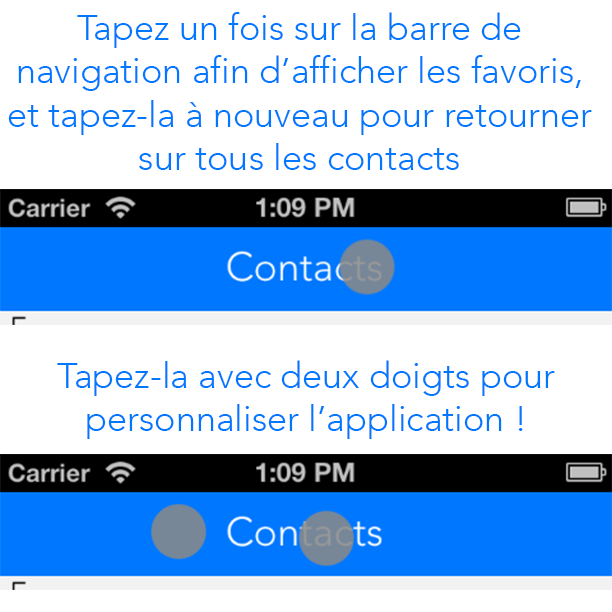
<style>
.page{position:relative;width:612px;height:612px;background:#ffffff}
.page>*{position:absolute;margin:0}
.t1{font:36px "Avenir-Light";color:#0077ff}
</style>
<div class="page">
<p class="t1" style="left:8px;top:12px;width:584px;height:158px;text-align:center">Tapez un fois sur la barre de<br>navigation afin d’afficher les favoris, et tapez-la à nouveau pour retourner sur tous les contacts</p>
<p class="t1" style="left:57px;top:360px;width:498px;height:79px;text-align:center">Tapez-la avec deux doigts pour<br>personnaliser l’application !</p>
</div>
